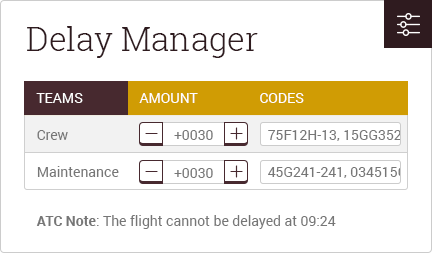
<style>
.page{position:relative;width:432px;height:253px;background:#ffffff}
.page>*{position:absolute;margin:0}
.t1{font:33px "RobotoSlab-Light";color:#2f1b1f}
.t2{font:14px "Roboto-Regular";color:#ffffff;text-transform:uppercase}
.t3{font:14px "Roboto-Regular";color:#767676}
.t4{font:14px "Roboto-Bold";color:#767676}
</style>
<div class="page">
<p class="t1" style="left:27px;top:26px;width:231px;height:32px">Delay Manager</p>
<p class="t2" style="left:36px;top:93px;width:47px;height:10px">Teams</p>
<p class="t2" style="left:139px;top:93px;width:59px;height:10px">Amount</p>
<p class="t2" style="left:260px;top:93px;width:44px;height:10px">Codes</p>
<p class="t3" style="left:37px;top:130px;width:31px;height:10px">Crew</p>
<p class="t3" style="left:174px;top:130px;width:39px;height:10px">+0030</p>
<p class="t3" style="left:268px;top:130px;width:141px;height:11px">75F12H-13, 15GG3523</p>
<p class="t3" style="left:37px;top:166px;width:82px;height:11px">Maintenance</p>
<p class="t3" style="left:174px;top:168px;width:39px;height:10px">+0030</p>
<p class="t3" style="left:268px;top:167px;width:139px;height:11px">45G241-241, 034515G</p>
<p class="t3" style="left:36px;top:215px;width:300px;height:14px"><span class="t4">ATC Note</span>: The flight cannot be delayed at 09:24</p>
</div>
